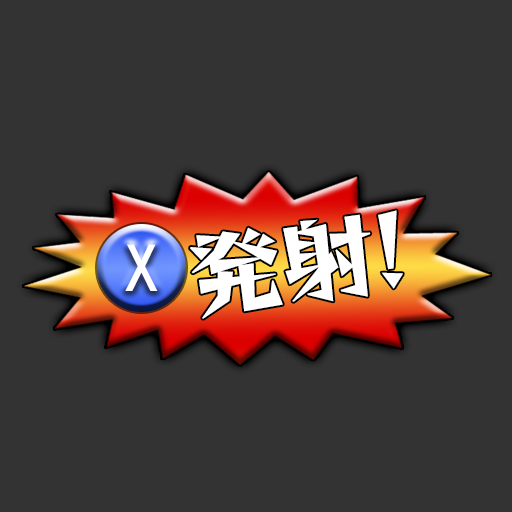
<style>
.page{position:relative;width:512px;height:512px;background:#333333}
.page>*{position:absolute;margin:0}
.t1{font:93.7px "ReggaeOne-Regular";letter-spacing:-0.05em;color:#ffffff;font-variant:small-caps;scale:1.04 1}
.t2{font:58.3px "HGPGothicE";letter-spacing:0.05em;color:#ffffff;font-variant:small-caps}
</style>
<div class="page">
<p class="t1" style="left:190px;top:210px;width:213px;height:109px;rotate:-8deg">発射!</p>
<p class="t2" style="left:125px;top:244px;width:33px;height:47px">X</p>
</div>
